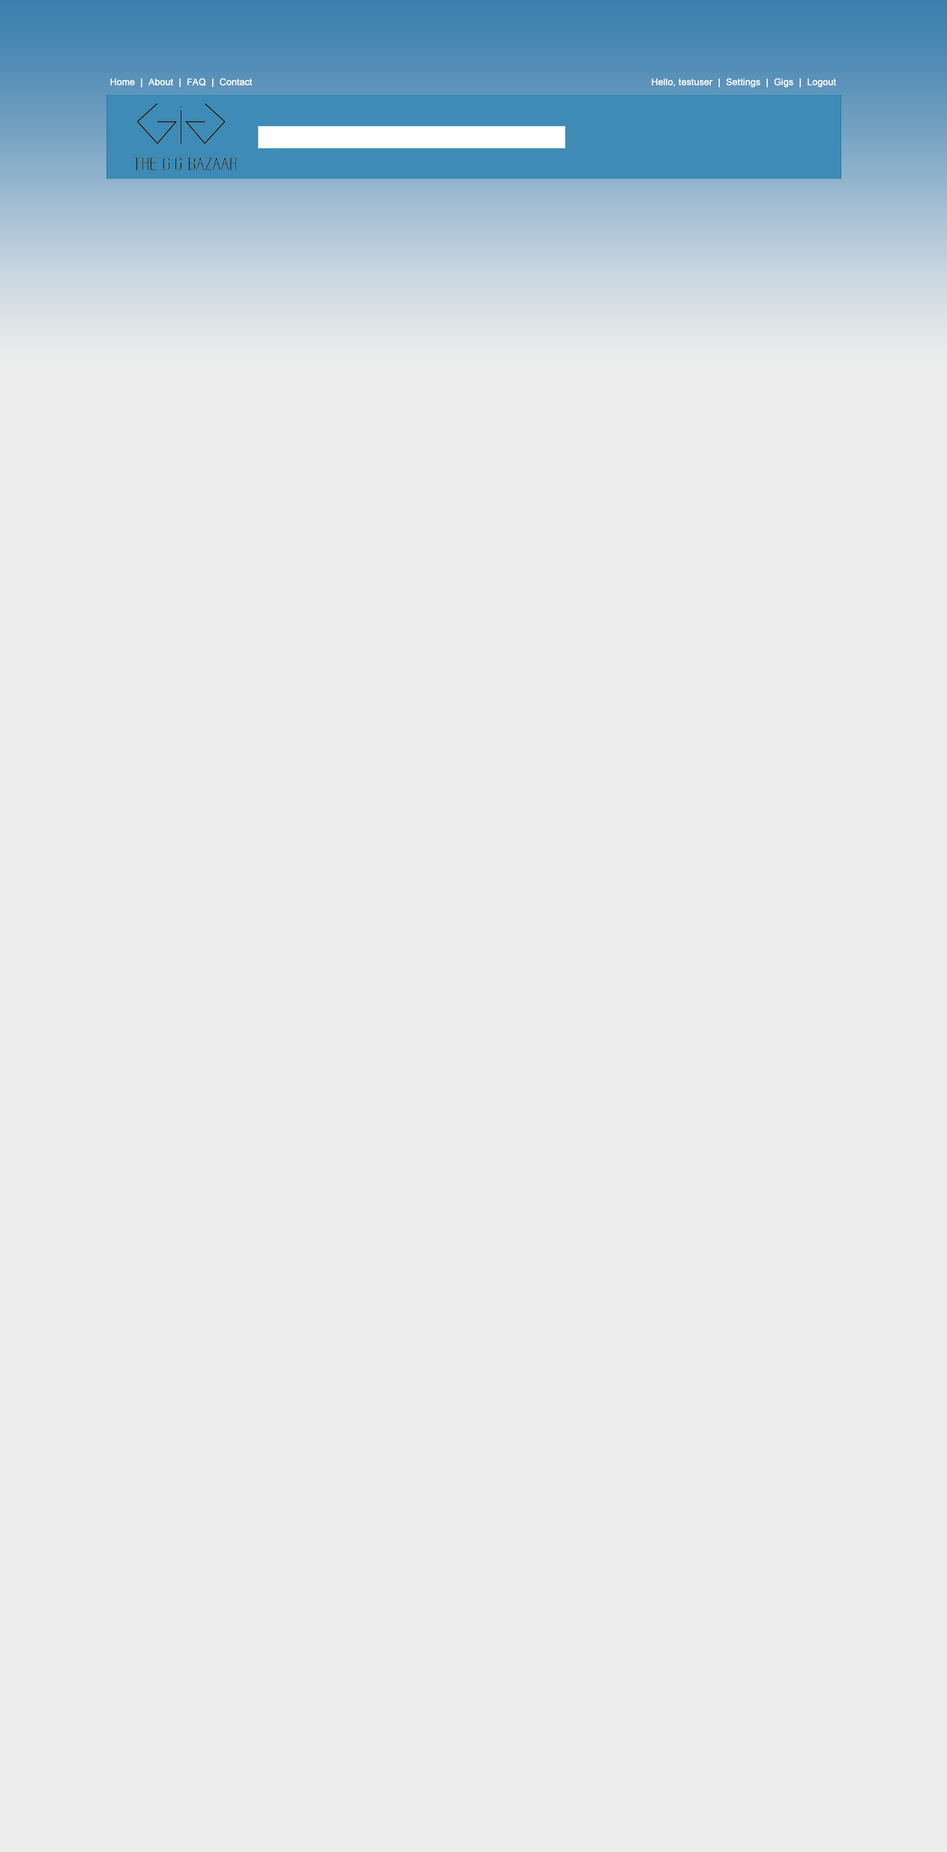
<style>
.page{position:relative;width:947px;height:1852px;background:#ededed}
.page>*{position:absolute;margin:0}
.t1{font:9px "ArialMT";color:#ffffff;font-weight:bold}
</style>
<div class="page">
<p class="t1" style="left:110px;top:78px;width:143px;height:10px">Home  |  About  |  FAQ  |  Contact</p>
<p class="t1" style="left:652px;top:78px;width:184px;height:10px">Hello, testuser  |  Settings  |  Gigs  |  Logout</p>
</div>
